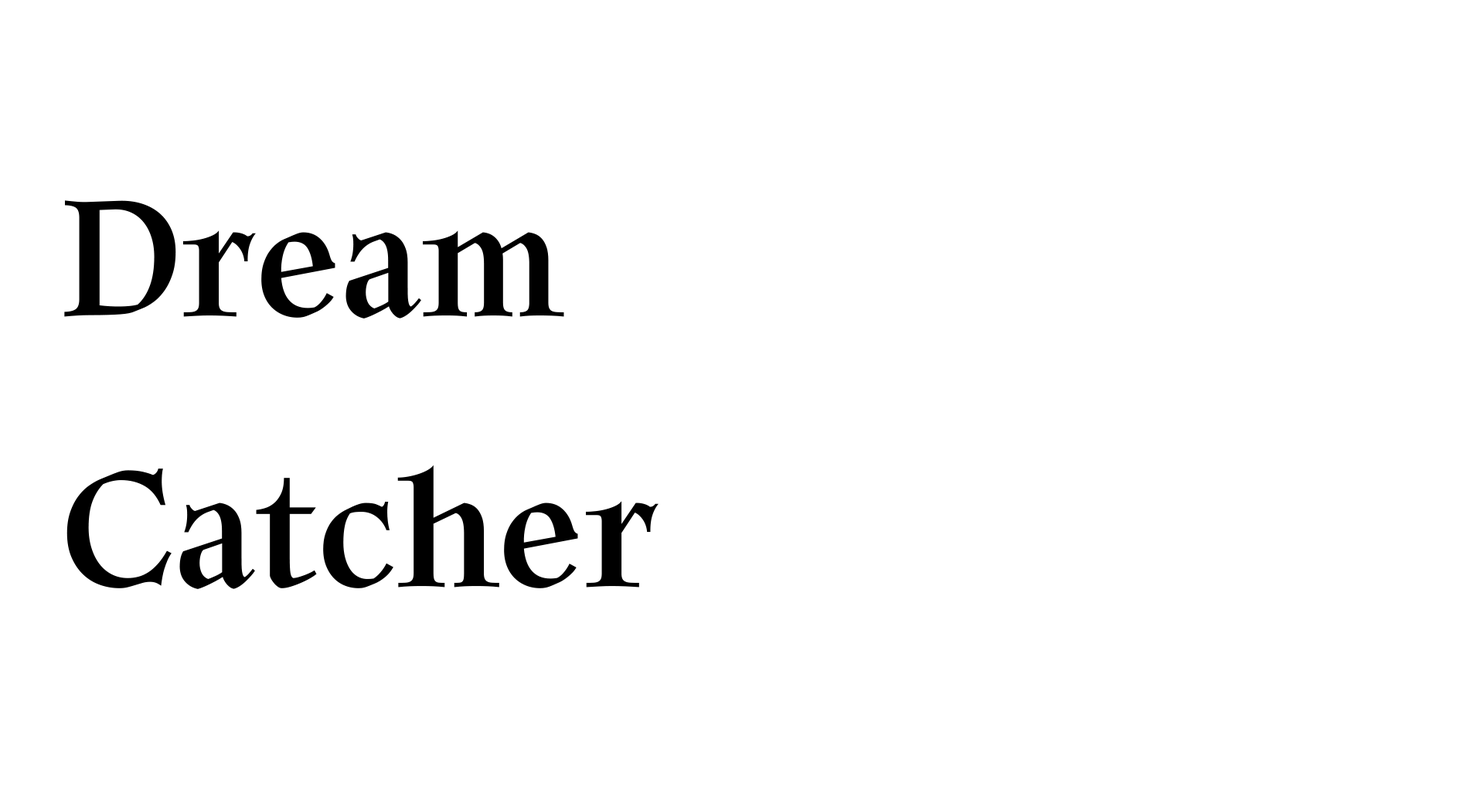
<style>
.page{position:relative;width:1484px;height:804px;background:#ffffff}
.page>*{position:absolute;margin:0}
.t1{font:154.6px "HeirofLightBold";color:#000000}
</style>
<div class="page">
<p class="t1" style="left:64px;top:200px;width:594px;height:389px">Dream<br>Catcher</p>
</div>
